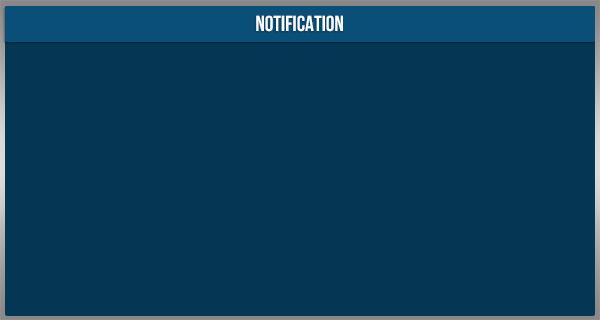
<style>
.page{position:relative;width:600px;height:320px;background:#053754}
.page>*{position:absolute;margin:0}
.t1{font:21.7px "UTM-Bebas";color:#ffffff}
</style>
<div class="page">
<p class="t1" style="left:256px;top:15px;width:87px;height:17px">notification</p>
</div>
